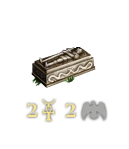
<style>
.page{position:relative;width:129px;height:149px;background:#ffffff}
.page>*{position:absolute;margin:0}
.t1{font:19.3px "BluuNext-Titling";letter-spacing:1.702em;color:#f6e395;scale:1.16 1}
</style>
<div class="page">
<p class="t1" style="left:26px;top:103px;width:12px;height:14px">2</p>
<p class="t1" style="left:65px;top:103px;width:11px;height:14px">2</p>
</div>
